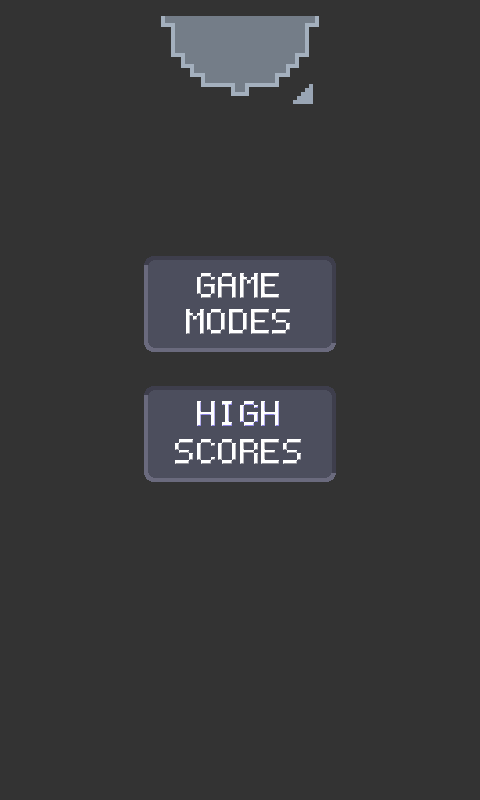
<style>
.page{position:relative;width:480px;height:800px;background:#333333}
.page>*{position:absolute;margin:0}
.t1{font:56.7px "Coder's-Crux";color:#ffffff}
</style>
<div class="page">
<p class="t1" style="left:197px;top:273px;width:82px;height:25px">GAME</p>
<p class="t1" style="left:197px;top:273px;width:82px;height:25px">GAME</p>
<p class="t1" style="left:186px;top:309px;width:104px;height:25px">MODES</p>
<p class="t1" style="left:186px;top:309px;width:104px;height:25px">MODES</p>
<p class="t1" style="left:197px;top:401px;width:82px;height:25px">HIGH</p>
<p class="t1" style="left:197px;top:401px;width:82px;height:25px">HIGH</p>
<p class="t1" style="left:175px;top:439px;width:126px;height:25px">SCORES</p>
<p class="t1" style="left:175px;top:439px;width:126px;height:25px">SCORES</p>
</div>
